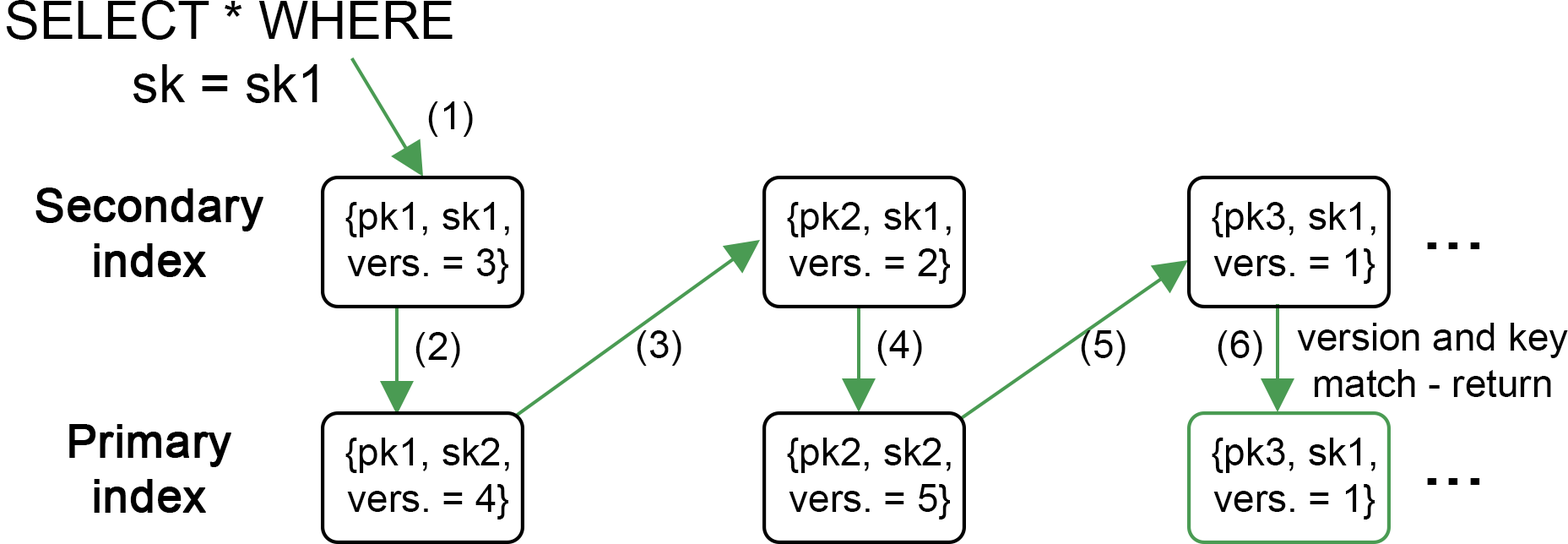
<style>
.page{position:relative;width:1568px;height:544px;background:#ffffff}
.page>*{position:absolute;margin:0}
.t1{font:52.8px "ArialMT";color:#000000}
.t2{font:38.7px "ArialMT";color:#000000}
.t3{font:45.7px "ArialMT";color:#000000;font-weight:bold}
.t4{font:70.4px "ArialMT";color:#000000;font-weight:bold}
</style>
<div class="page">
<p class="t1" style="left:6px;top:0px;width:447px;height:103px;text-align:center">SELECT * WHERE<br>sk = sk1</p>
<p class="t2" style="left:428px;top:101px;width:45px;height:36px">(1)</p>
<p class="t3" style="left:35px;top:187px;width:228px;height:90px;text-align:center">Secondary<br>index</p>
<p class="t2" style="left:345px;top:202px;width:164px;height:82px;text-align:center">{pk1, sk1,<br>vers. = 3}</p>
<p class="t2" style="left:787px;top:202px;width:164px;height:82px;text-align:center">{pk2, sk1,<br>vers. = 2}</p>
<p class="t2" style="left:1212px;top:202px;width:163px;height:82px;text-align:center">{pk3, sk1,<br>vers. = 1}</p>
<p class="t4" style="left:1427px;top:242px;width:53px;height:7px">...</p>
<p class="t2" style="left:1297px;top:323px;width:271px;height:74px;text-align:center">version and key<br>match - return</p>
<p class="t2" style="left:415px;top:332px;width:45px;height:35px">(2)</p>
<p class="t2" style="left:637px;top:330px;width:44px;height:36px">(3)</p>
<p class="t2" style="left:877px;top:330px;width:45px;height:36px">(4)</p>
<p class="t2" style="left:1081px;top:330px;width:45px;height:36px">(5)</p>
<p class="t2" style="left:1218px;top:330px;width:44px;height:36px">(6)</p>
<p class="t3" style="left:69px;top:424px;width:162px;height:89px;text-align:center">Primary<br>index</p>
<p class="t2" style="left:345px;top:437px;width:164px;height:82px;text-align:center">{pk1, sk2,<br>vers. = 4}</p>
<p class="t2" style="left:787px;top:437px;width:164px;height:82px;text-align:center">{pk2, sk2,<br>vers. = 5}</p>
<p class="t2" style="left:1212px;top:437px;width:163px;height:82px;text-align:center">{pk3, sk1,<br>vers. = 1}</p>
<p class="t4" style="left:1427px;top:478px;width:53px;height:7px">...</p>
</div>
